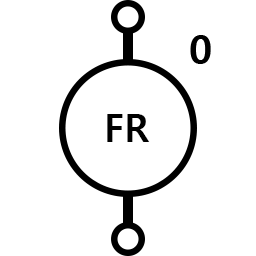
<style>
.page{position:relative;width:256px;height:256px;background:#ffffff}
.page>*{position:absolute;margin:0}
.t1{font:39.6px "MalgunGothicBold";color:#000000}
.t2{font:37.5px "MalgunGothicBold";color:#000000}
</style>
<div class="page">
<p class="t1" style="left:190px;top:35px;width:21px;height:29px">0</p>
<p class="t2" style="left:107px;top:114px;width:43px;height:28px">FR</p>
</div>
